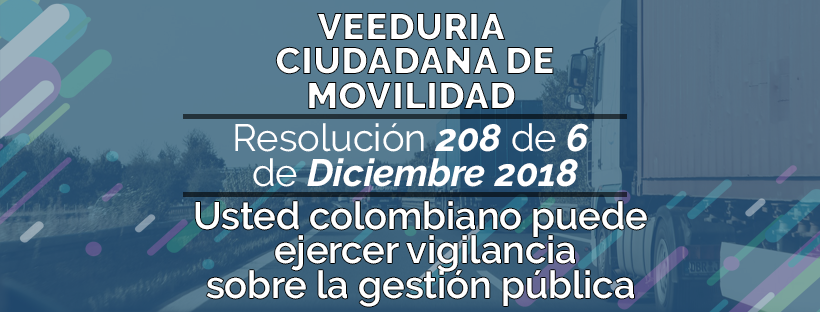
<style>
.page{position:relative;width:820px;height:312px}
.page>*{position:absolute;margin:0}
.t1{font:37.9px/34.4px "Raleway-Black";color:#ffffff}
.t2{font:37.9px/34.4px "Raleway-BoldItalic";color:#ffffff}
.t3{font:37.9px/34.4px "Raleway-Regular";color:#ffffff}
.t4{font:37.9px/34.4px "Raleway-SemiBold";color:#ffffff}
</style>
<div class="page">
<p class="t1" style="left:275px;top:13px;width:279px;height:97px;text-align:center">VEEDURIA <br>CIUDADANA DE<br>MOVILIDAD</p>
<p class="t2" style="left:235px;top:123px;width:354px;height:64px;text-align:center"><span class="t3">Resolución </span>208<span class="t3"> de </span>6 <br><span class="t3">de </span>Diciembre 2018</p>
<p class="t4" style="left:195px;top:201px;width:452px;height:106px;text-align:center">Usted colombiano puede<br> ejercer vigilancia<br>sobre la gestión pública</p>
</div>
